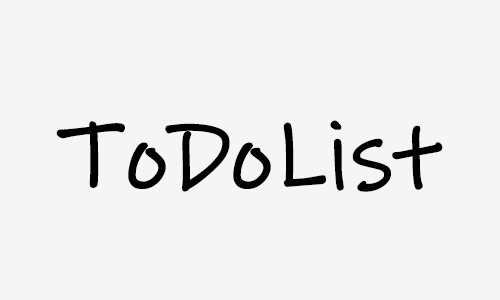
<style>
.page{position:relative;width:500px;height:300px;background:#f6f5f5}
.page>*{position:absolute;margin:0}
.t1{font:95.8px "InkFree";letter-spacing:-0.02em;color:#010101;font-weight:bold}
</style>
<div class="page">
<p class="t1" style="left:56px;top:120px;width:387px;height:72px">ToDoList</p>
</div>
